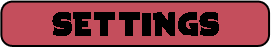
<style>
.page{position:relative;width:271px;height:47px;background:#c44e5c}
.page>*{position:absolute;margin:0}
.t1{font:18px "SpaceComics";color:#000000}
</style>
<div class="page">
<p class="t1" style="left:52px;top:12px;width:167px;height:24px">SETTINGS</p>
</div>
